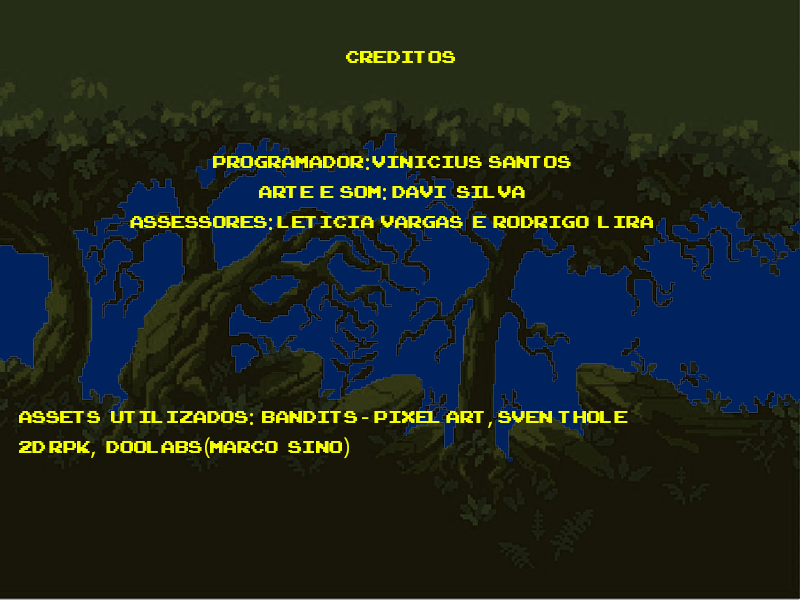
<style>
.page{position:relative;width:800px;height:600px;background:#181608}
.page>*{position:absolute;margin:0}
.t1{font:25px "ArcadeClassic";color:#f6ff00}
.t2{font:25px "MyriadPro-Regular";color:#f6ff00}
</style>
<div class="page">
<p class="t1" style="left:346px;top:51px;width:109px;height:12px">Creditos</p>
<p class="t1" style="left:130px;top:156px;width:523px;height:74px;text-align:center">Programador<span class="t2">:</span> Vinicius  santos<br>Arte  e  som<span class="t2">: </span>davi   silva<br>Assessores<span class="t2">: </span>leticia  Vargas   E  Rodrigo   Lira</p>
<p class="t1" style="left:19px;top:411px;width:609px;height:48px">Assets   utilizados<span class="t2">: </span> Bandits <span class="t2">- </span>Pixel art<span class="t2">, </span>Sven  thole<br>2d rpk<span class="t2">,  </span>Doolabs<span class="t2">(</span>marco   sino<span class="t2">)</span></p>
</div>
